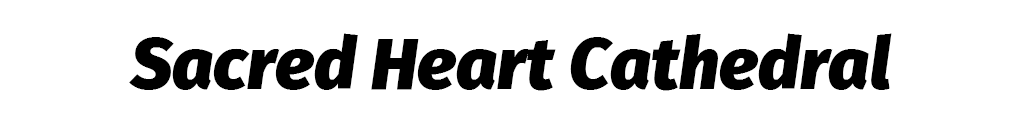
<style>
.page{position:relative;width:1024px;height:128px;background:#ffffff}
.page>*{position:absolute;margin:0}
.t1{font:71.8px "FiraSans-BlackItalic";color:#000000}
</style>
<div class="page">
<p class="t1" style="left:129px;top:33px;width:763px;height:58px">Sacred Heart Cathedral</p>
</div>
